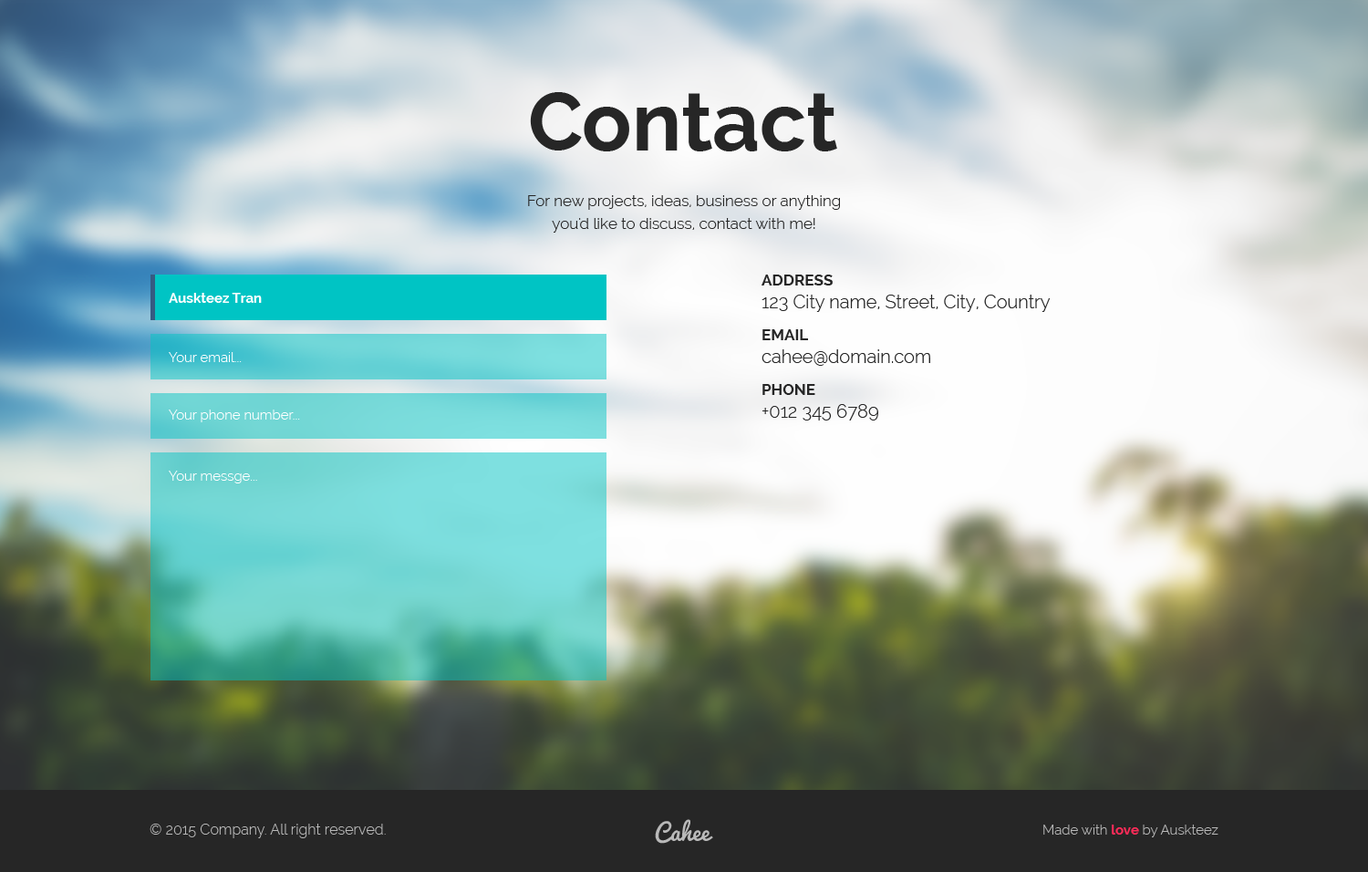
<style>
.page{position:relative;width:1368px;height:872px}
.page>*{position:absolute;margin:0}
.t1{font:82.1px "Raleway-Bold";color:#262626}
.t2{font:15.5px/22.8px "Raleway-Light";color:#262626}
.t3{font:18.2px/22.8px "Raleway-Light";color:#262626}
.t4{font:15.5px/22.8px "Raleway-Bold";color:#262626}
.t5{font:13.7px "Raleway-Bold";color:#ffffff}
.t6{font:13.7px "Raleway-Light";color:#ffffff}
.t7{font:22.8px "Pacifico-Regular";color:#b9b9b9}
.t8{font:14.6px "Raleway-Light";color:#b9b9b9}
.t9{font:13.7px "Raleway-Light";color:#b9b9b9}
.t10{font:13.7px "Raleway-Bold";color:#ff2b58}
</style>
<div class="page">
<p class="t1" style="left:530px;top:92px;width:307px;height:59px">Contact</p>
<p class="t2" style="left:528px;top:195px;width:312px;height:38px;text-align:center">For new projects, ideas, business or anything<br>you'd like to discuss, contact with me!</p>
<p class="t3" style="left:761px;top:274px;width:289px;height:146px"><span class="t4">ADDRESS<br></span>123 City name, Street, City, Country<br><span class="t4">EMAIL<br></span>cahee@domain.com<br><span class="t4">PHONE<br></span>+012 345 6789</p>
<p class="t5" style="left:169px;top:293px;width:93px;height:10px">Auskteez Tran</p>
<p class="t6" style="left:169px;top:352px;width:73px;height:10px">Your email...</p>
<p class="t6" style="left:169px;top:409px;width:131px;height:13px">Your phone number...</p>
<p class="t6" style="left:169px;top:471px;width:88px;height:12px">Your messge...</p>
<p class="t7" style="left:655px;top:819px;width:58px;height:24px">Cahee</p>
<p class="t8" style="left:150px;top:823px;width:236px;height:15px">© 2015 Company. All right reserved.</p>
<p class="t9" style="left:1043px;top:824px;width:175px;height:13px">Made with <span class="t10">love </span>by Auskteez</p>
</div>
